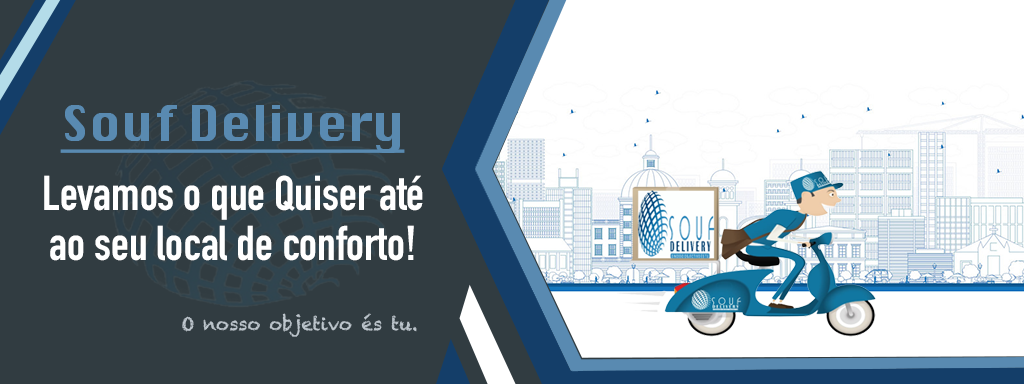
<style>
.page{position:relative;width:1024px;height:384px;background:#313c41}
.page>*{position:absolute;margin:0}
.t1{font:48px "Krungthep";color:#598ab1;text-decoration:underline}
.t2{font:48px/50px "DINCondensed-Bold";color:#ffffff}
.t3{font:18px "Chalkduster";color:#bdc6cd}
</style>
<div class="page">
<p class="t1" style="left:60px;top:105px;width:345px;height:48px">Souf Delivery</p>
<p class="t2" style="left:44px;top:175px;width:379px;height:86px;text-align:center">Levamos o que Quiser até ao seu local de conforto!</p>
<p class="t3" style="left:182px;top:313px;width:235px;height:24px">O nosso objetivo és tu.</p>
</div>
